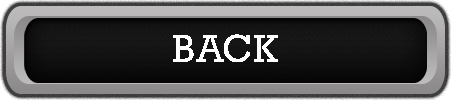
<style>
.page{position:relative;width:451px;height:100px}
.page>*{position:absolute;margin:0}
.t1{font:39.8px "Rockwell";color:#ffffff}
</style>
<div class="page">
<p class="t1" style="left:173px;top:34px;width:105px;height:28px">BACK</p>
</div>
